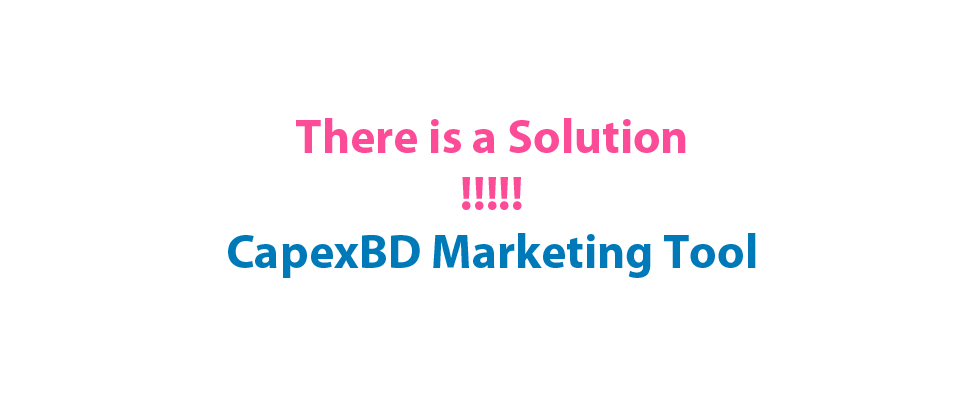
<style>
.page{position:relative;width:980px;height:410px;background:#ffffff}
.page>*{position:absolute;margin:0}
.t1{font:48px "MyriadPro-Bold";color:#fd4c97}
.t2{font:48px "MyriadPro-Bold";color:#0079b8}
</style>
<div class="page">
<p class="t1" style="left:228px;top:118px;width:528px;height:160px;text-align:center">There is a Solution<br>!!!!!<br><span class="t2">CapexBD Marketing Tool</span></p>
</div>
